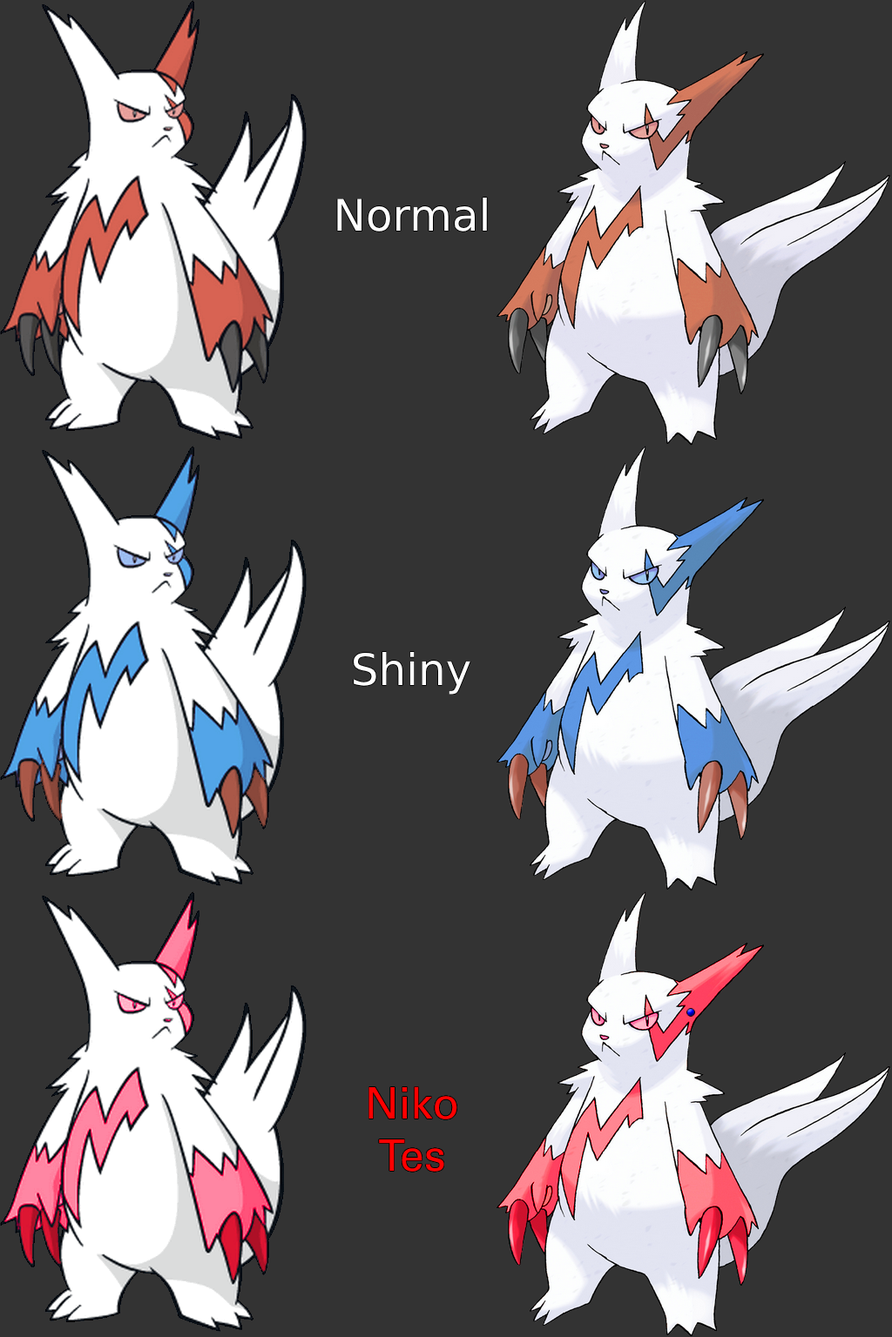
<style>
.page{position:relative;width:892px;height:1337px;background:#333333}
.page>*{position:absolute;margin:0}
.t1{font:43.5px "DejaVuSans";color:#ffffff}
.t2{font:43.5px "UniversLTStd";color:#ff0000}
</style>
<div class="page">
<p class="t1" style="left:337px;top:198px;width:150px;height:34px">Normal</p>
<p class="t1" style="left:354px;top:652px;width:116px;height:43px">Shiny</p>
<p class="t2" style="left:368px;top:1087px;width:89px;height:85px;text-align:center">Niko<br>Tes</p>
</div>
